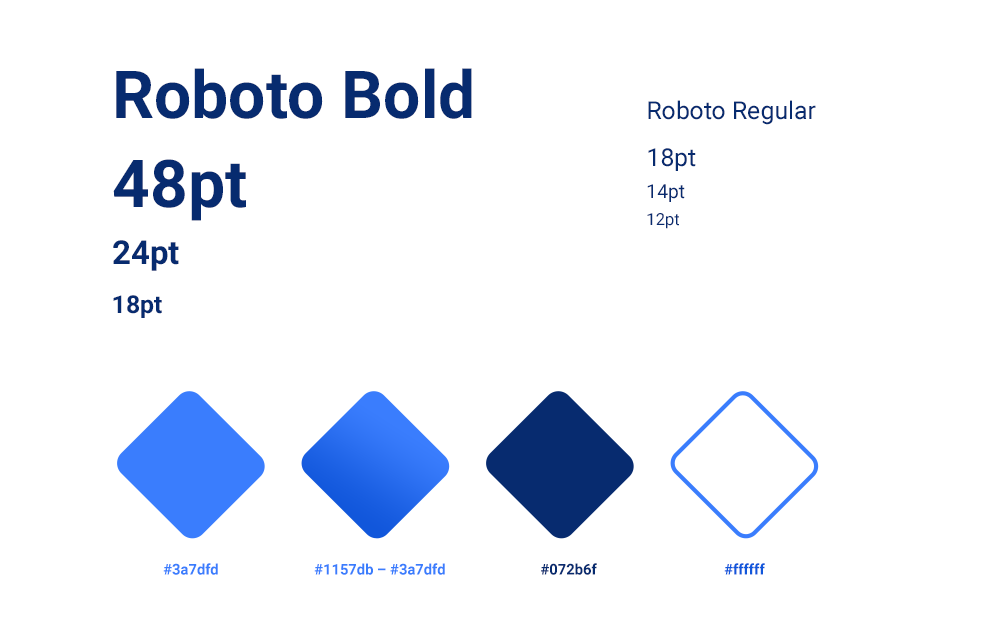
<style>
.page{position:relative;width:1000px;height:624px;background:#ffffff}
.page>*{position:absolute;margin:0}
.t1{font:66.1px "Roboto-Bold";color:#072b6f}
.t2{font:24.8px "Roboto-Regular";color:#072b6f}
.t3{font:19.3px "Roboto-Regular";color:#072b6f}
.t4{font:16.5px "Roboto-Regular";color:#072b6f}
.t5{font:33.1px "Roboto-Bold";color:#072b6f}
.t6{font:24.8px "Roboto-Bold";color:#072b6f}
.t7{font:14.7px "Roboto-Bold";color:#3a7dfd}
.t8{font:14.7px "Roboto-Bold";color:#072b6f}
.t9{font:14.7px "Roboto-Bold";color:#1157db}
</style>
<div class="page">
<p class="t1" style="left:116px;top:68px;width:356px;height:51px">Roboto Bold</p>
<p class="t2" style="left:648px;top:100px;width:168px;height:25px">Roboto Regular</p>
<p class="t2" style="left:648px;top:148px;width:48px;height:23px">18pt</p>
<p class="t1" style="left:113px;top:159px;width:133px;height:62px">48pt</p>
<p class="t3" style="left:647px;top:184px;width:38px;height:18px">14pt</p>
<p class="t4" style="left:647px;top:213px;width:32px;height:16px">12pt</p>
<p class="t5" style="left:113px;top:240px;width:66px;height:31px">24pt</p>
<p class="t6" style="left:113px;top:295px;width:49px;height:23px">18pt</p>
<p class="t7" style="left:163px;top:563px;width:55px;height:12px">#3a7dfd</p>
<p class="t7" style="left:314px;top:563px;width:131px;height:12px">#1157db – #3a7dfd</p>
<p class="t8" style="left:541px;top:563px;width:56px;height:12px">#072b6f</p>
<p class="t9" style="left:724px;top:563px;width:41px;height:12px">#ffffff</p>
</div>
